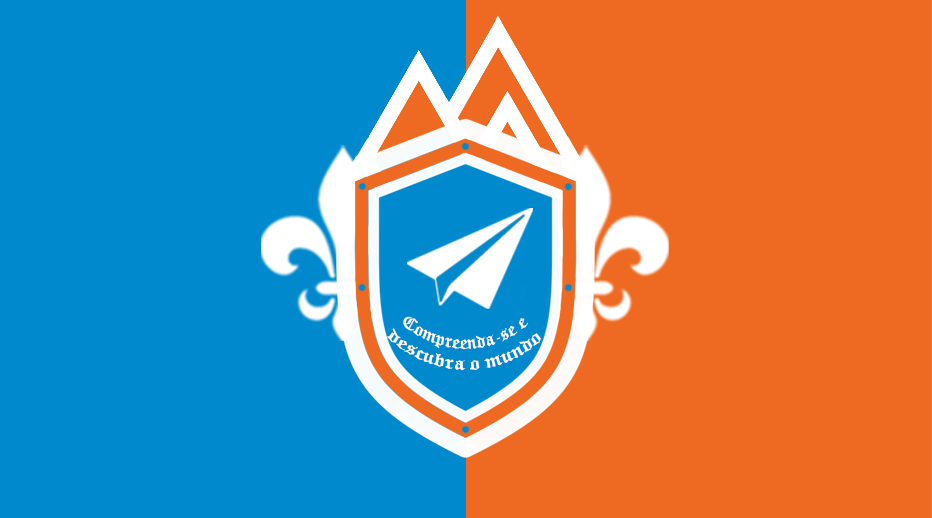
<style>
.page{position:relative;width:932px;height:518px;background:#0089cd}
.page>*{position:absolute;margin:0}
.t1{font:17.6px "OldEnglishTextMT";color:#ffffff;scale:0.9 1}
</style>
<div class="page">
<p class="t1" style="left:387px;top:316px;width:154px;height:55px;rotate:1deg">Compreenda-se e descubra o mundo</p>
</div>
